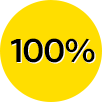
<style>
.page{position:relative;width:102px;height:102px;background:#ffde00}
.page>*{position:absolute;margin:0}
.t1{font:32.4px "WhitneySSm-Semibold";letter-spacing:-0.05em;color:#000000}
.t2{font:32.4px "WhitneySSm-Semibold";letter-spacing:-0.05em}
</style>
<div class="page">
<p class="t1" style="left:11px;top:38px;width:84px;height:25px">100%</p>
<p class="t2" style="left:12px;top:39px;width:84px;height:25px">100%</p>
</div>
